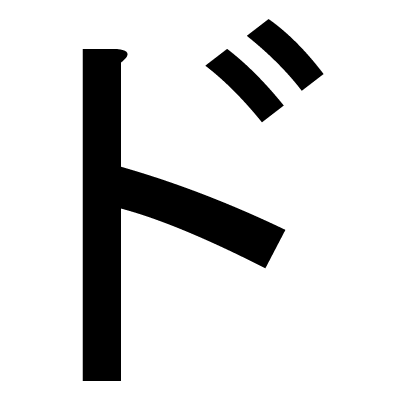
<style>
.page{position:relative;width:400px;height:400px;background:#ffffff}
.page>*{position:absolute;margin:0}
.t1{font:424.8px "MS-PGothic";color:#000000}
</style>
<div class="page">
<p class="t1" style="left:82px;top:19px;width:242px;height:362px">ド</p>
</div>
